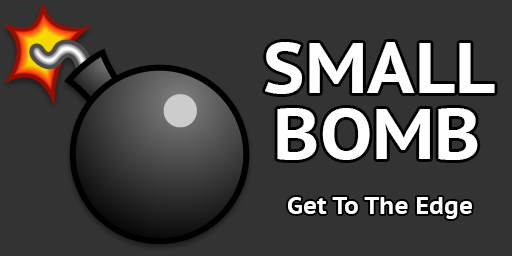
<style>
.page{position:relative;width:512px;height:256px;background:#333333}
.page>*{position:absolute;margin:0}
.t1{font:72px/66px "PTSans-CaptionBold";color:#ffffff}
.t2{font:24px "PTSans-CaptionBold";color:#ffffff}
</style>
<div class="page">
<p class="t1" style="left:265px;top:42px;width:230px;height:118px;text-align:center">SMALL<br>BOMB</p>
<p class="t2" style="left:288px;top:197px;width:184px;height:22px">Get To The Edge</p>
</div>
